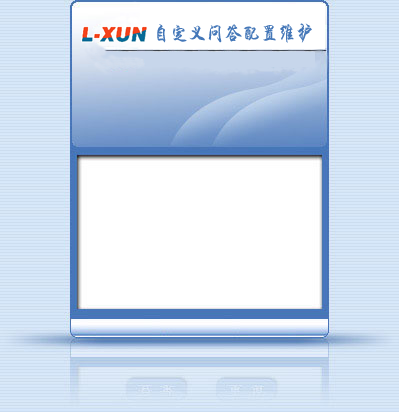
<style>
.page{position:relative;width:399px;height:412px;background:#ffffff}
.page>*{position:absolute;margin:0}
.t1{font:19.8px "HYi4gj";color:#4477b8;scale:0.91 1}
</style>
<div class="page">
<p class="t1" style="left:157px;top:23px;width:155px;height:20px">自定义问答配置维护</p>
</div>
